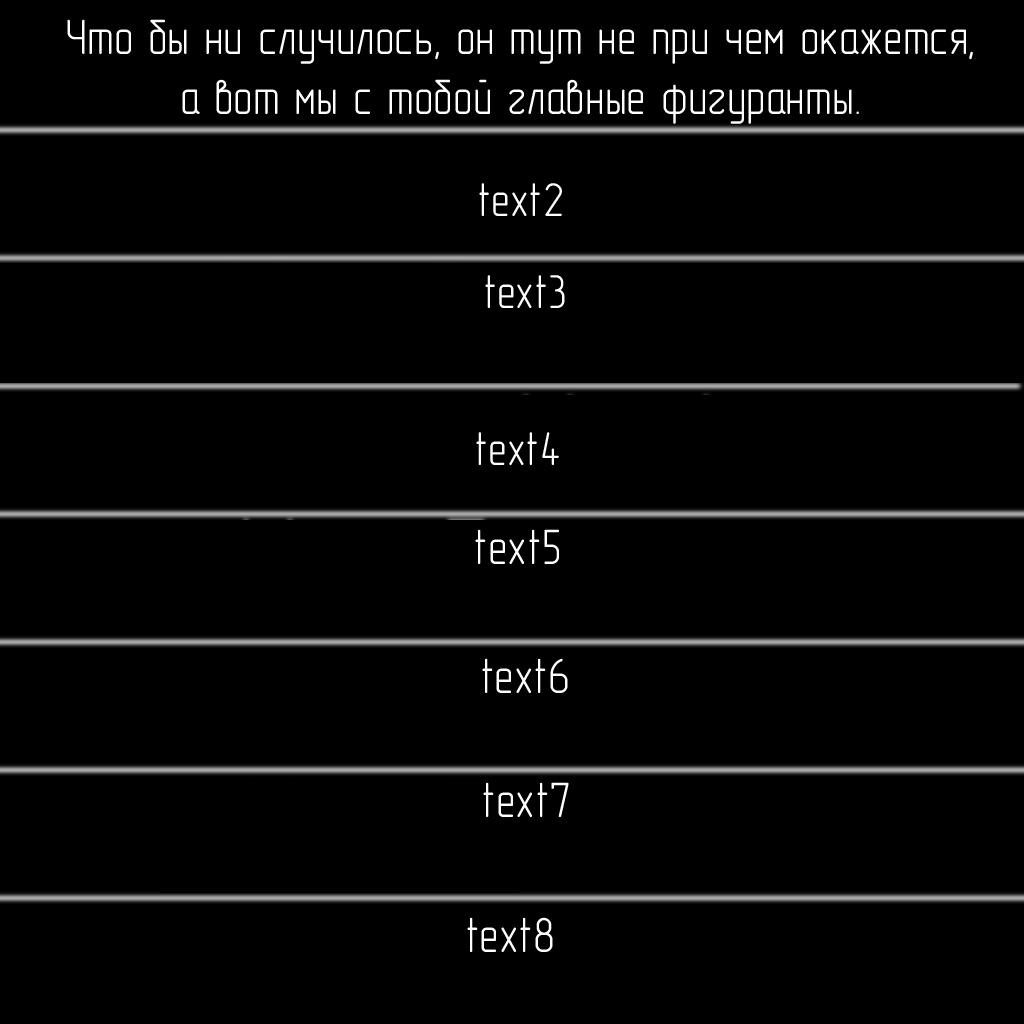
<style>
.page{position:relative;width:1024px;height:1024px;background:#000000}
.page>*{position:absolute;margin:0}
.t1{font:50px "GOST-2.304-81typeA";color:#ffffff}
.t2{font:48px "GOST-2.304-81typeA";color:#ffffff}
</style>
<div class="page">
<p class="t1" style="left:67px;top:19px;width:906px;height:105px;text-align:center">Что бы ни случилось, он тут не при чем окажется,<br>а вот мы с тобой главные фигуранты.</p>
<p class="t2" style="left:479px;top:183px;width:83px;height:33px">text2</p>
<p class="t2" style="left:485px;top:275px;width:80px;height:33px">text3</p>
<p class="t2" style="left:476px;top:432px;width:83px;height:33px">text4</p>
<p class="t1" style="left:475px;top:529px;width:84px;height:35px">text5</p>
<p class="t1" style="left:482px;top:658px;width:86px;height:35px">text6</p>
<p class="t1" style="left:483px;top:782px;width:86px;height:35px">text7</p>
<p class="t1" style="left:467px;top:917px;width:86px;height:35px">text8</p>
</div>
